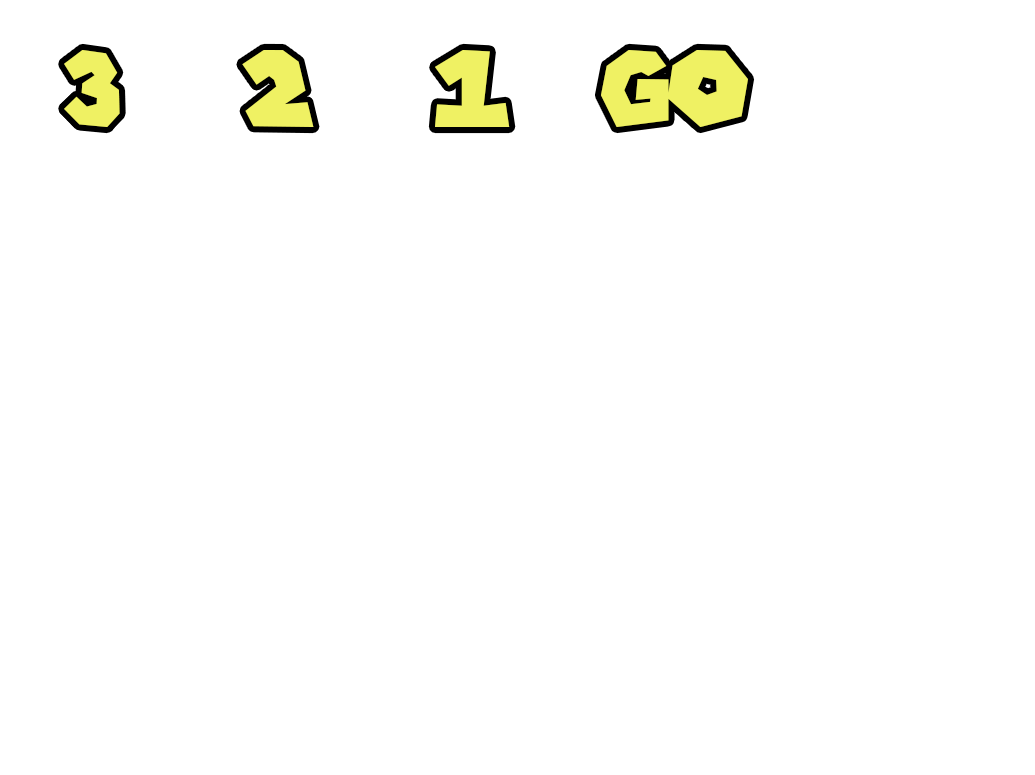
<style>
.page{position:relative;width:1035px;height:775px;background:#ffffff}
.page>*{position:absolute;margin:0}
.t1{font:104.2px "SuperMarioGalaxy";color:#eff163}
</style>
<div class="page">
<p class="t1" style="left:64px;top:50px;width:56px;height:77px">3</p>
<p class="t1" style="left:242px;top:50px;width:72px;height:77px">2</p>
<p class="t1" style="left:435px;top:50px;width:75px;height:77px">1</p>
<p class="t1" style="left:601px;top:50px;width:147px;height:77px">GO</p>
</div>
